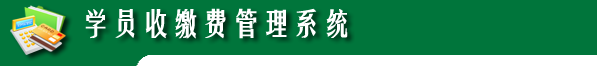
<style>
.page{position:relative;width:597px;height:66px;background:#00753b}
.page>*{position:absolute;margin:0}
.t1{font:29.3px "FZYTJW--GB1-0";color:#ffffff;font-weight:bold}
</style>
<div class="page">
<p class="t1" style="left:85px;top:8px;width:263px;height:31px">学员收缴费管理系统</p>
</div>
